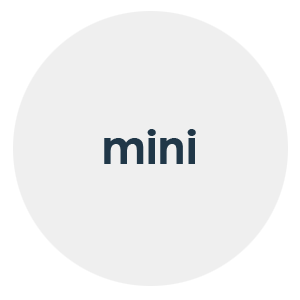
<style>
.page{position:relative;width:300px;height:300px;background:#efefef}
.page>*{position:absolute;margin:0}
.t1{font:48px "CenturyGothic-Bold";color:#203748}
</style>
<div class="page">
<p class="t1" style="left:104px;top:129px;width:92px;height:35px">mini</p>
</div>
